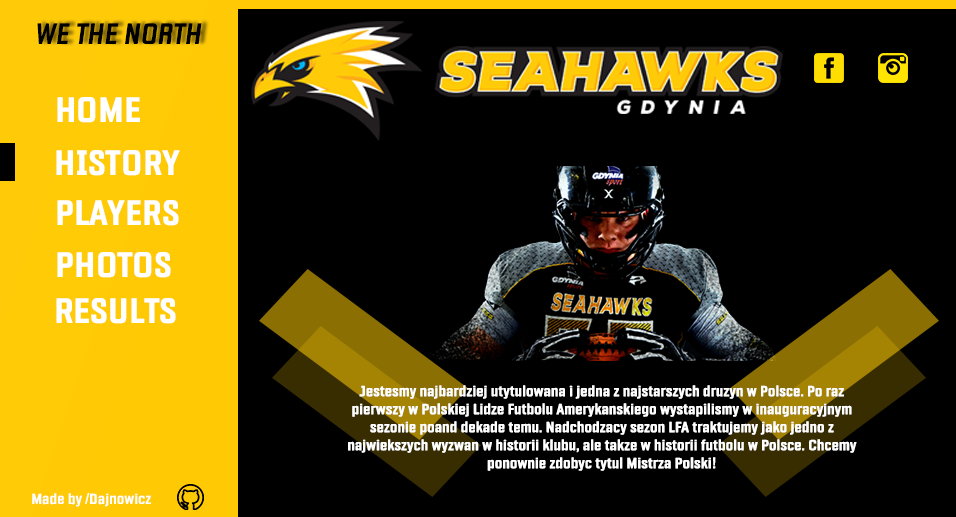
<style>
.page{position:relative;width:956px;height:517px;background:#000000}
.page>*{position:absolute;margin:0}
.t1{font:30px "Fragua-BoldItalic";color:#000000}
.t2{font:36px "Fragua-Bold";color:#ffffff}
.t3{font:15px "Fragua-Bold";color:#ffffff}
</style>
<div class="page">
<p class="t1" style="left:37px;top:23px;width:165px;height:21px">WE THE NORTH</p>
<p class="t2" style="left:57px;top:97px;width:83px;height:26px">HOME</p>
<p class="t2" style="left:56px;top:150px;width:124px;height:26px">HISTORY</p>
<p class="t2" style="left:57px;top:200px;width:122px;height:26px">PLAYERS</p>
<p class="t2" style="left:57px;top:252px;width:114px;height:26px">PHOTOS</p>
<p class="t2" style="left:56px;top:298px;width:120px;height:26px">RESULTS</p>
<p class="t3" style="left:348px;top:385px;width:509px;height:86px;text-align:center">Jestesmy najbardziej utytulowana i jedna z najstarszych druzyn w Polsce. Po raz pierwszy w Polskiej Lidze Futbolu Amerykanskiego wystapilismy w inauguracyjnym sezonie poand dekade temu. Nadchodzacy sezon LFA traktujemy jako jedno z najwiekszych wyzwan w historii klubu, ale takze w historii futbolu w Polsce. Chcemy ponownie zdobyc tytul Mistrza Polski!</p>
<p class="t3" style="left:32px;top:493px;width:119px;height:14px">Made by /Dajnowicz</p>
</div>
